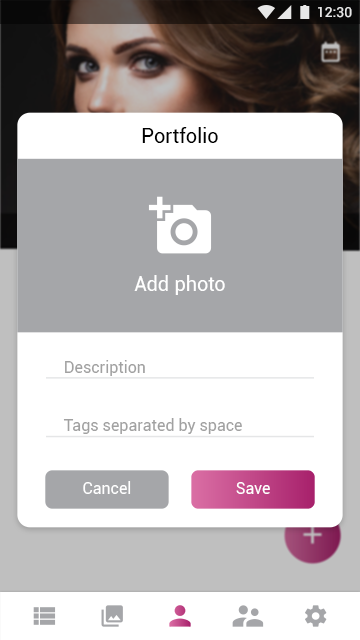
<style>
.page{position:relative;width:360px;height:640px;background:#ffffff}
.page>*{position:absolute;margin:0}
.t1{font:14px "Roboto-Medium";color:#ffffff}
.t2{font:20px "Roboto-Regular";color:#000000}
.t3{font:20px "Roboto-Regular";letter-spacing:0.01em;color:#ffffff}
.t4{font:16px "Roboto-Regular";color:#a1a1a1}
.t5{font:16px "Roboto-Regular";color:#ffffff}
</style>
<div class="page">
<p class="t1" style="left:318px;top:7px;width:34px;height:11px">12:30</p>
<p class="t2" style="left:142px;top:127px;width:76px;height:16px">Portfolio</p>
<p class="t3" style="left:134px;top:275px;width:91px;height:20px">Add photo</p>
<p class="t4" style="left:65px;top:360px;width:80px;height:16px">Description</p>
<p class="t4" style="left:63px;top:418px;width:179px;height:16px">Tags separated by space</p>
<p class="t5" style="left:83px;top:481px;width:48px;height:13px">Cancel</p>
<p class="t5" style="left:236px;top:482px;width:34px;height:12px">Save</p>
</div>
